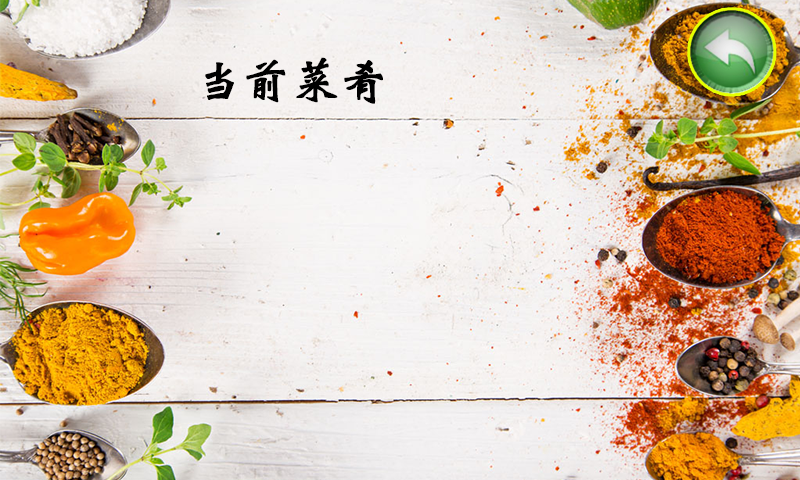
<style>
.page{position:relative;width:800px;height:480px}
.page>*{position:absolute;margin:0}
.t1{font:48px "STXinwei";letter-spacing:-0.005em;color:#000000;font-weight:bold}
</style>
<div class="page">
<p class="t1" style="left:205px;top:57px;width:178px;height:47px">当前菜肴</p>
</div>
